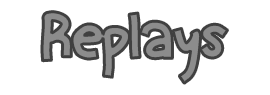
<style>
.page{position:relative;width:270px;height:95px;background:#ffffff}
.page>*{position:absolute;margin:0}
.t1{font:72px "Animated"}
</style>
<div class="page">
<p class="t1" style="left:42px;top:11px;width:186px;height:72px">Replays</p>
</div>
